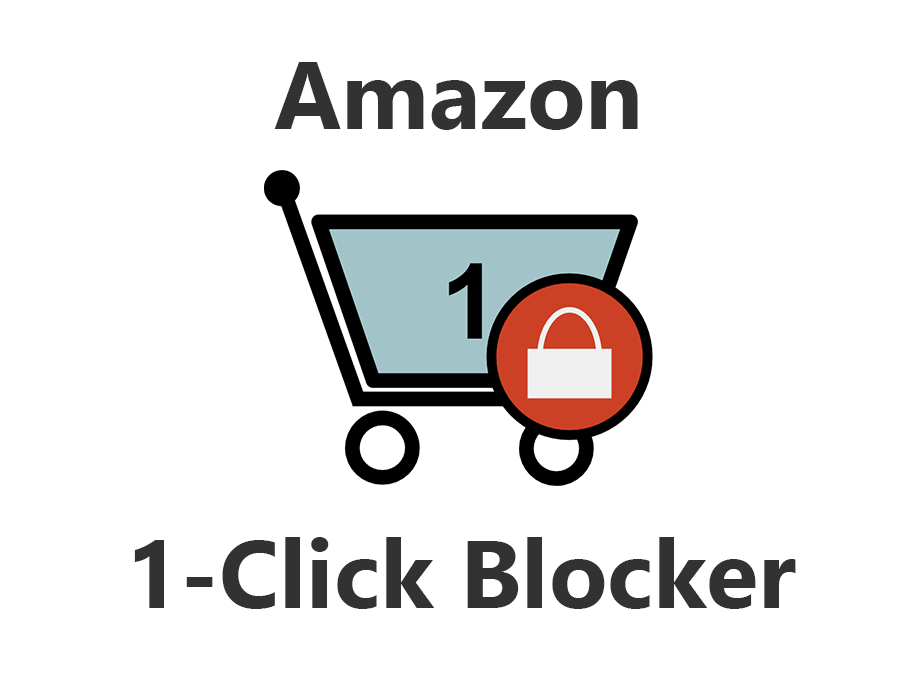
<style>
.page{position:relative;width:920px;height:680px;background:#ffffff}
.page>*{position:absolute;margin:0}
.t1{font:96px "SegoeUI-Bold";color:#323232}
</style>
<div class="page">
<p class="t1" style="left:274px;top:62px;width:364px;height:68px">Amazon</p>
<p class="t1" style="left:134px;top:537px;width:662px;height:72px">1-Click Blocker</p>
</div>
